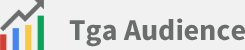
<style>
.page{position:relative;width:245px;height:50px;background:#f1f1f1}
.page>*{position:absolute;margin:0}
.t1{font:30px "SourceSansPro-Bold";color:#6b6c6c}
</style>
<div class="page">
<p class="t1" style="left:69px;top:18px;width:176px;height:29px">Tga Audience</p>
</div>
